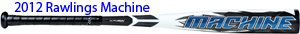
<style>
.page{position:relative;width:300px;height:34px;background:#ffffff}
.page>*{position:absolute;margin:0}
.t1{font:14px "MyriadPro-Regular";color:#0000ff}
</style>
<div class="page">
<p class="t1" style="left:14px;top:2px;width:136px;height:13px">2012 Rawlings Machine</p>
</div>
